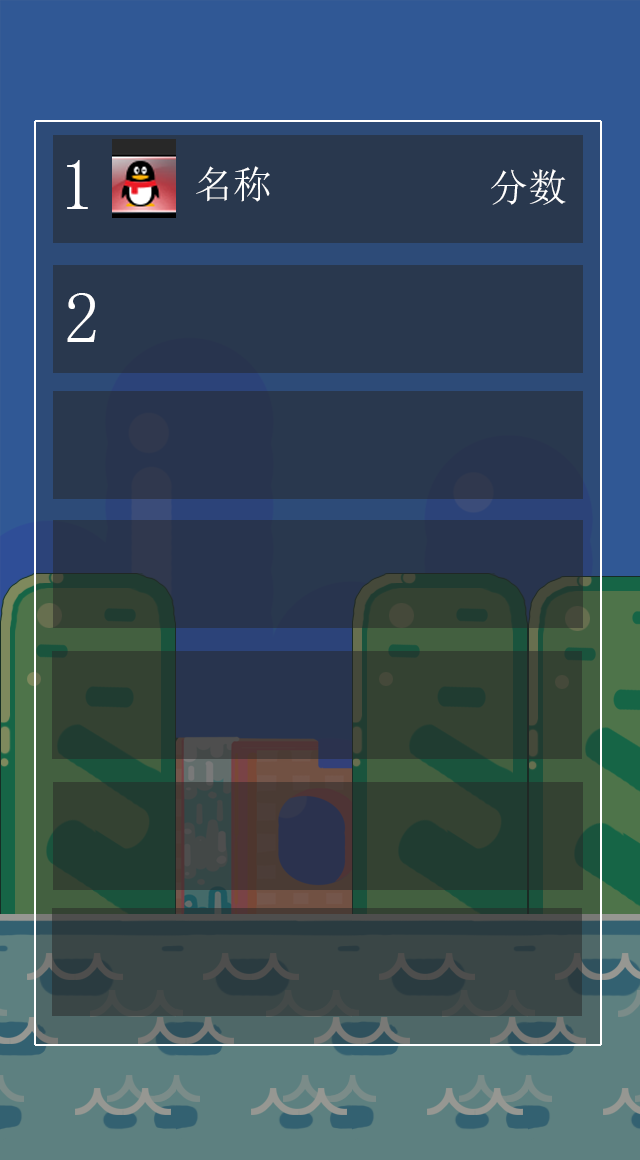
<style>
.page{position:relative;width:640px;height:1160px}
.page>*{position:absolute;margin:0}
.t1{font:72px "SimSun";color:#ffffff}
.t2{font:38.9px "SimSun";color:#ffffff}
</style>
<div class="page">
<p class="t1" style="left:67px;top:160px;width:21px;height:49px">1</p>
<p class="t2" style="left:196px;top:166px;width:74px;height:36px">名称</p>
<p class="t2" style="left:491px;top:169px;width:75px;height:36px">分数</p>
<p class="t1" style="left:67px;top:293px;width:29px;height:49px">2</p>
</div>
